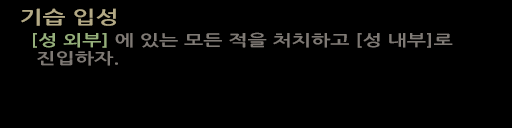
<style>
.page{position:relative;width:512px;height:128px;background:#000000}
.page>*{position:absolute;margin:0}
.t1{font:18px "NanumGothicBold";color:#b4aa86;scale:1.36 1}
.t2{font:15.4px/18px "NanumGothicBold";color:#7e7974;scale:1.33 1}
.t3{font:15.4px/18px "NanumGothicBold";color:#96af7b;scale:1.33 1}
</style>
<div class="page">
<p class="t1" style="left:21px;top:8px;width:95px;height:18px">기습 입성</p>
<p class="t2" style="left:33px;top:32px;width:420px;height:34px"><span class="t3">[성 외부] </span>에 있는 모든 적을 처치하고 [성 내부]로 <br> 진입하자.</p>
</div>
